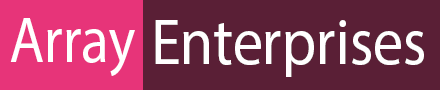
<style>
.page{position:relative;width:440px;height:90px;background:#5a1f36}
.page>*{position:absolute;margin:0}
.t1{font:65.3px "MyriadPro-Regular";color:#ffffff;scale:0.87 1}
.t2{font:65.3px "MyriadPro-Regular";color:#ffffff;scale:0.91 1}
</style>
<div class="page">
<p class="t1" style="left:10px;top:18px;width:125px;height:58px">Array</p>
<p class="t2" style="left:155px;top:20px;width:269px;height:57px">Enterprises</p>
</div>
